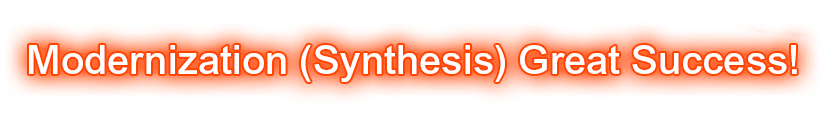
<style>
.page{position:relative;width:824px;height:128px;background:#ffffff}
.page>*{position:absolute;margin:0}
.t1{font:40px "ArialMTStd-Medium";color:#ffffff}
</style>
<div class="page">
<p class="t1" style="left:29px;top:45px;width:768px;height:37px">Modernization (Synthesis) Great Success!</p>
</div>
